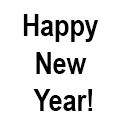
<style>
.page{position:relative;width:128px;height:128px;background:#ffffff}
.page>*{position:absolute;margin:0}
.t1{font:31px "ArialNarrow-Bold";letter-spacing:-0.01em;color:#000000}
</style>
<div class="page">
<p class="t1" style="left:23px;top:14px;width:76px;height:97px;text-align:center">Happy <br>New <br>Year!</p>
</div>
